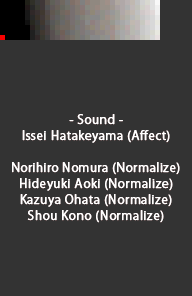
<style>
.page{position:relative;width:192px;height:296px;background:#333333}
.page>*{position:absolute;margin:0}
.t1{font:12px/16px "KozGoPr6N-Regular";letter-spacing:0.025em;color:#ffffff;font-weight:bold}
.t2{font:12px/16px "KozGoPr6N-Regular";letter-spacing:0.01em;color:#ffffff;font-weight:bold}
</style>
<div class="page">
<p class="t1" style="left:12px;top:114px;width:168px;height:109px;text-align:center">- Sound -<br>Issei Hatakeyama (Affect)<br><br><span class="t2">Norihiro Nomura</span> (Normalize)<br>Hideyuki Aoki (Normalize)<br>Kazuya Ohata (Normalize)<br>Shou Kono (Normalize)</p>
</div>
